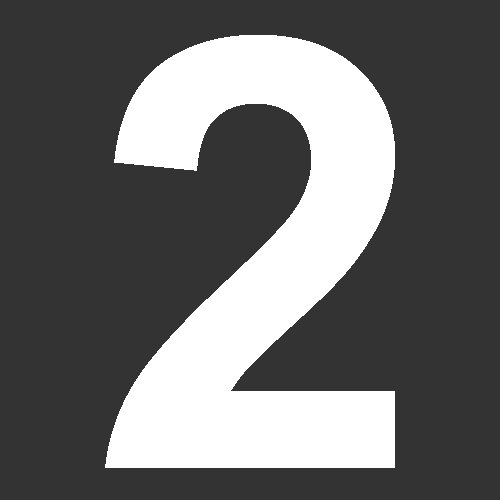
<style>
.page{position:relative;width:500px;height:500px;background:#333333}
.page>*{position:absolute;margin:0}
.t1{font:600px "Arial-BoldMT";color:#ffffff}
</style>
<div class="page">
<p class="t1" style="left:105px;top:35px;width:290px;height:433px">2</p>
</div>
